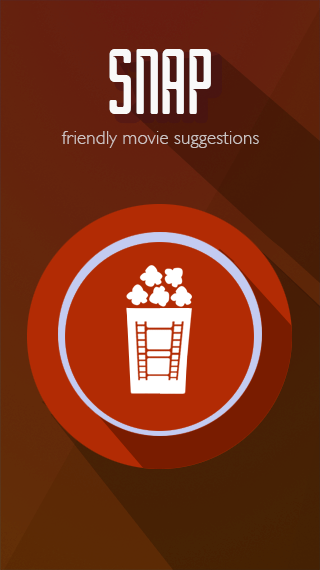
<style>
.page{position:relative;width:320px;height:570px}
.page>*{position:absolute;margin:0}
.t1{font:98.3px "Borg";color:#f9f9f9}
.t2{font:19.3px "GillSans-Light";color:#cbc3c2}
</style>
<div class="page">
<p class="t1" style="left:109px;top:49px;width:102px;height:65px">SNAP</p>
<p class="t2" style="left:61px;top:131px;width:198px;height:17px">friendly movie suggestions</p>
</div>
